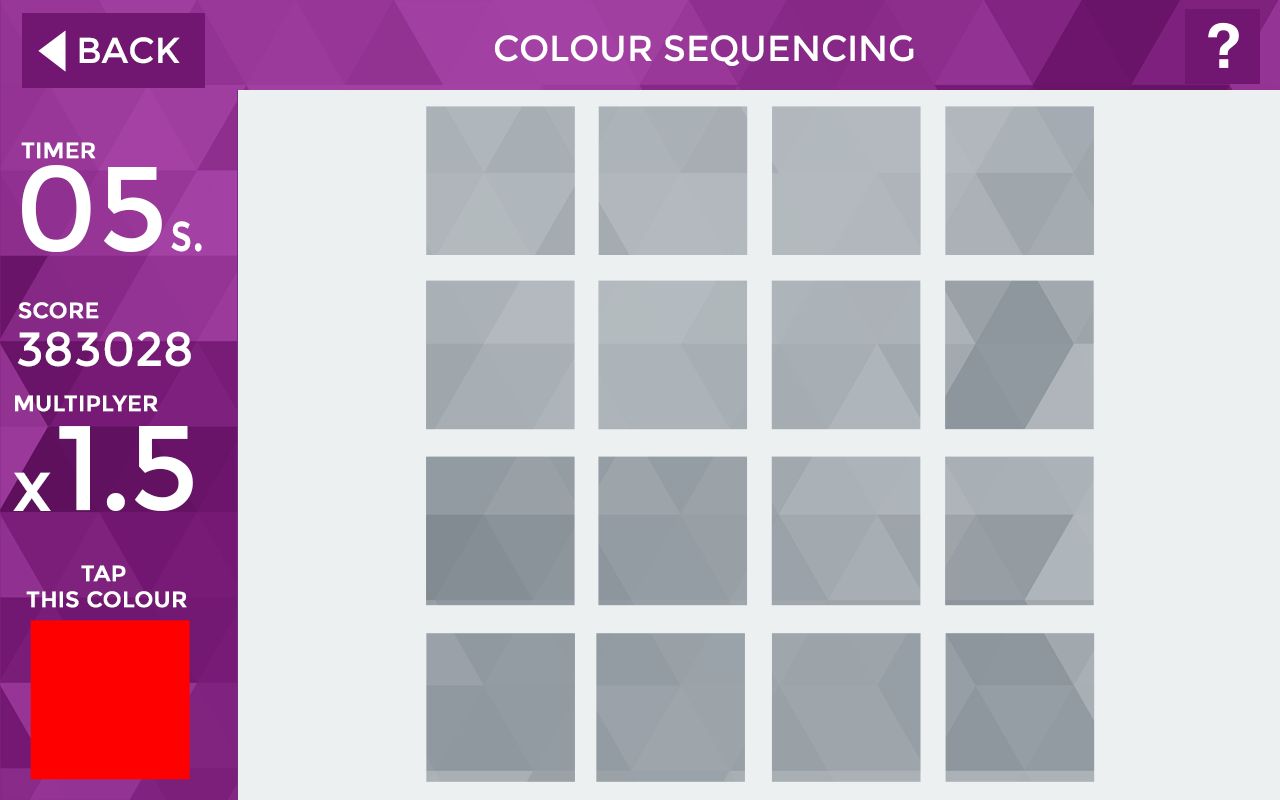
<style>
.page{position:relative;width:1280px;height:800px;background:#ecf0f1}
.page>*{position:absolute;margin:0}
.t1{font:36px "Montserrat-Regular";color:#ffffff}
.t2{font:36px "Montserrat-Regular";color:#ffffff;text-transform:uppercase}
.t3{font:22px "Montserrat-Regular";color:#ffffff;font-weight:bold}
.t4{font:120px "Montserrat-Regular";color:#ffffff}
.t5{font:55px "Montserrat-Regular";color:#ffffff;scale:0.8 1}
.t6{font:48px "Montserrat-Regular";color:#ffffff}
.t7{font:120px "Montserrat-Regular";letter-spacing:-0.025em;color:#ffffff}
.t8{font:72px "Montserrat-Regular";color:#ffffff}
.t9{font:22px "Montserrat-Regular";color:#ffffff;text-transform:uppercase;font-weight:bold}
</style>
<div class="page">
<p class="t1" style="left:79px;top:37px;width:101px;height:27px">BACK</p>
<p class="t2" style="left:494px;top:35px;width:420px;height:31px">Colour Sequencing</p>
<p class="t3" style="left:21px;top:142px;width:75px;height:17px">TIMER</p>
<p class="t4" style="left:22px;top:165px;width:140px;height:87px">05</p>
<p class="t5" style="left:171px;top:221px;width:31px;height:31px">s.</p>
<p class="t3" style="left:18px;top:302px;width:81px;height:17px">SCORE</p>
<p class="t6" style="left:17px;top:331px;width:174px;height:36px">383028</p>
<p class="t3" style="left:15px;top:395px;width:143px;height:17px">MULTIPLYER</p>
<p class="t7" style="left:59px;top:426px;width:134px;height:85px">1.5</p>
<p class="t8" style="left:13px;top:472px;width:38px;height:39px">x</p>
<p class="t9" style="left:26px;top:565px;width:161px;height:43px;text-align:center">Tap <br>this colour</p>
</div>
